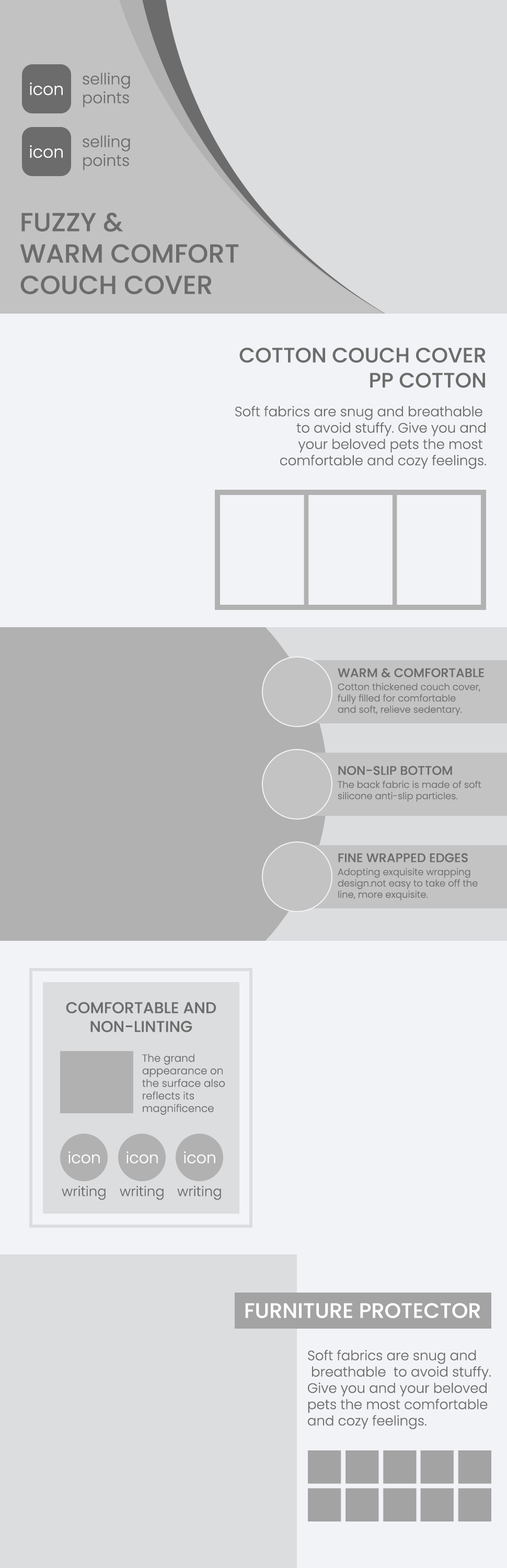
<style>
.page{position:relative;width:507px;height:1568px;background:#f2f3f6}
.page>*{position:absolute;margin:0}
.t1{font:15.7px "Poppins-Light";color:#6c6c6c}
.t2{font:16.5px "Poppins-Light";color:#ffffff}
.t3{font:26.1px "Poppins-Medium";color:#6c6c6c;text-transform:uppercase}
.t4{font:20.9px "Poppins-Medium";color:#6c6c6c}
.t5{font:13.6px "Poppins-Light";color:#6c6c6c}
.t6{font:12.5px "Poppins-Medium";color:#6c6c6c}
.t7{font:9.4px "Poppins-Light";color:#6c6c6c}
.t8{font:15.7px "Poppins-Medium";color:#6c6c6c}
.t9{font:10.5px "Poppins-Light";color:#6c6c6c}
.t10{font:15.7px "Poppins-Light";color:#ffffff}
.t11{font:20.9px "Poppins-Medium";color:#ffffff}
</style>
<div class="page">
<p class="t1" style="left:83px;top:72px;width:47px;height:36px">selling<br>points</p>
<p class="t2" style="left:30px;top:82px;width:33px;height:13px">icon</p>
<p class="t1" style="left:83px;top:135px;width:47px;height:35px">selling<br>points</p>
<p class="t2" style="left:30px;top:145px;width:33px;height:13px">icon</p>
<p class="t3" style="left:20px;top:212px;width:219px;height:82px">FUZZY &amp; <br>WARM COMFORT<br>COUCH COVER</p>
<p class="t4" style="left:239px;top:348px;width:247px;height:40px;text-align:right">COTTON COUCH COVER<br>PP COTTON</p>
<p class="t5" style="left:235px;top:406px;width:251px;height:63px;text-align:right">Soft fabrics are snug and breathable <br>to avoid stuffy. Give you and<br> your beloved pets the most <br>comfortable and cozy feelings.</p>
<p class="t6" style="left:338px;top:668px;width:146px;height:9px">WARM &amp; COMFORTABLE</p>
<p class="t7" style="left:338px;top:683px;width:142px;height:33px">Cotton thickened couch cover, <br>fully filled for comfortable<br>and soft, relieve sedentary.</p>
<p class="t6" style="left:338px;top:766px;width:114px;height:9px">NON-SLIP BOTTOM</p>
<p class="t7" style="left:338px;top:780px;width:143px;height:22px">The back fabric is made of soft <br>silicone anti-slip particles.</p>
<p class="t6" style="left:338px;top:853px;width:130px;height:9px">FINE WRAPPED EDGES</p>
<p class="t7" style="left:338px;top:868px;width:140px;height:33px">Adopting exquisite wrapping <br>design.not easy to take off the <br>line, more exquisite.</p>
<p class="t8" style="left:66px;top:1002px;width:150px;height:30px;text-align:center">COMFORTABLE AND<br>NON-LINTING</p>
<p class="t9" style="left:142px;top:1054px;width:83px;height:61px">The grand<br>appearance on<br>the surface also<br>reflects its <br>magnificence</p>
<p class="t10" style="left:68px;top:1151px;width:32px;height:12px">icon</p>
<p class="t10" style="left:126px;top:1151px;width:32px;height:12px">icon</p>
<p class="t10" style="left:184px;top:1151px;width:31px;height:12px">icon</p>
<p class="t5" style="left:62px;top:1185px;width:44px;height:15px">writing</p>
<p class="t5" style="left:120px;top:1185px;width:44px;height:15px">writing</p>
<p class="t5" style="left:177px;top:1185px;width:44px;height:15px">writing</p>
<p class="t11" style="left:245px;top:1303px;width:235px;height:15px">FURNITURE PROTECTOR</p>
<p class="t5" style="left:308px;top:1350px;width:183px;height:79px">Soft fabrics are snug and<br> breathable  to avoid stuffy. <br>Give you and your beloved <br>pets the most comfortable <br>and cozy feelings.</p>
</div>
